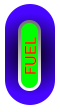
<style>
.page{position:relative;width:60px;height:112px;background:#ffffff}
.page>*{position:absolute;margin:0}
.t1{font:15px "ArialMT";color:#ff0000}
</style>
<div class="page">
<p class="t1" style="left:24px;top:37px;width:13px;height:37px;rotate:-90deg">FUEL</p>
</div>
